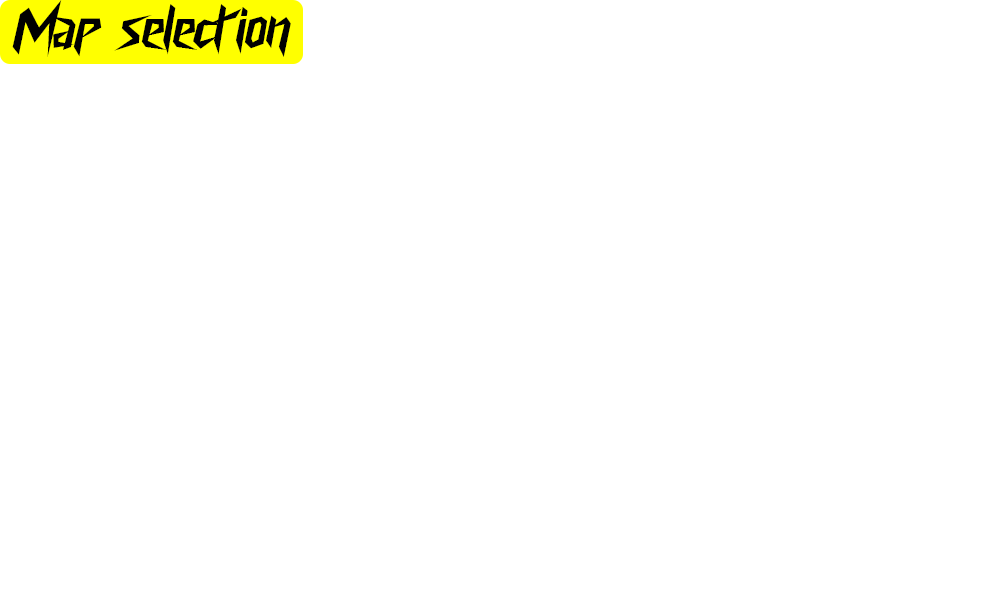
<style>
.page{position:relative;width:1001px;height:595px;background:#ffffff}
.page>*{position:absolute;margin:0}
.t1{font:56.3px "CyberwayRiders";color:#000000}
</style>
<div class="page">
<p class="t1" style="left:12px;top:0px;width:279px;height:57px">Map  selection</p>
</div>
